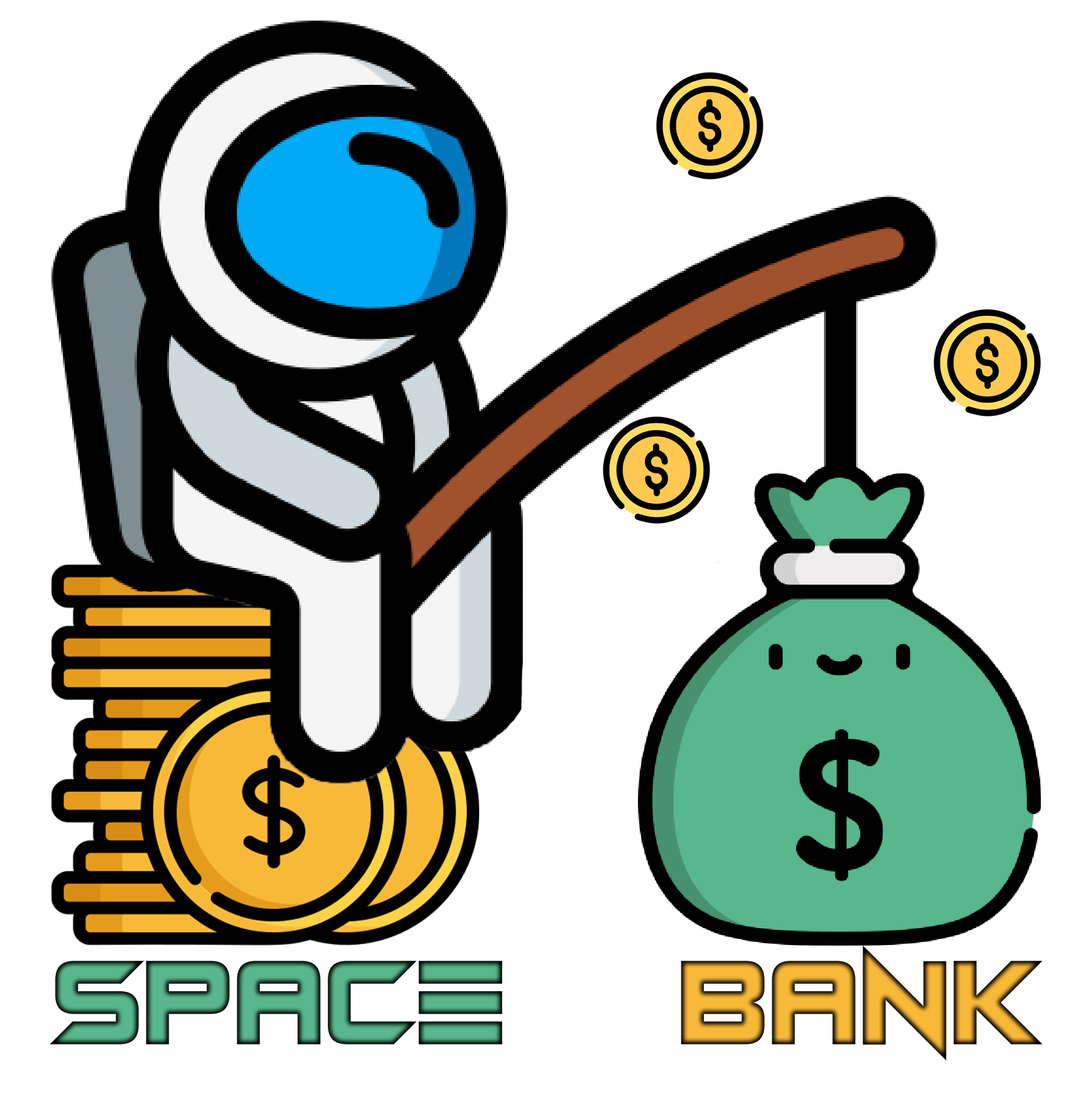
<style>
.page{position:relative;width:1079px;height:1105px;background:#ffffff}
.page>*{position:absolute;margin:0}
.t1{font:121.2px "AndroidAssassin"}
</style>
<div class="page">
<p class="t1" style="left:681px;top:945px;width:362px;height:116px">Bank</p>
<p class="t1" style="left:50px;top:961px;width:452px;height:83px">Space</p>
</div>
